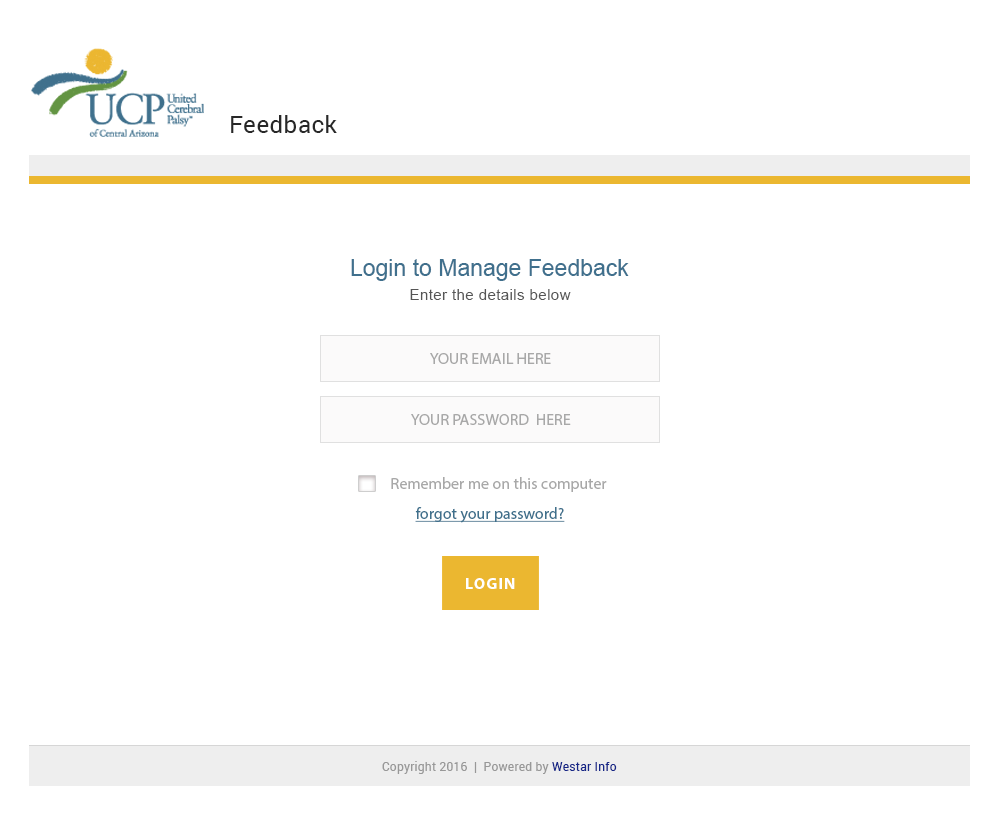
<style>
.page{position:relative;width:1000px;height:834px;background:#ffffff}
.page>*{position:absolute;margin:0}
.t1{font:24px "Roboto-Regular";letter-spacing:0.02em;color:#282828}
.t2{font:23px "ArialMT";color:#40708d}
.t3{font:15.1px "ArialMT";letter-spacing:0.025em;color:#555555}
.t4{font:16px "MyriadPro-Regular";color:#a8a8a8;text-transform:uppercase}
.t5{font:16px "MyriadPro-Regular";color:#a8a8a8}
.t6{font:16px "MyriadPro-Regular";color:#3f708c;text-decoration:underline}
.t7{font:16px "MyriadPro-Bold";letter-spacing:0.075em;color:#ffffff}
.t8{font:12px "Roboto-Regular";letter-spacing:0.02em;color:#989898}
.t9{font:12px "Roboto-Regular";letter-spacing:0.02em;color:#172788}
</style>
<div class="page">
<p class="t1" style="left:231px;top:115px;width:106px;height:18px">Feedback</p>
<p class="t2" style="left:351px;top:259px;width:278px;height:22px">Login to Manage Feedback</p>
<p class="t3" style="left:410px;top:289px;width:161px;height:11px">Enter the details below</p>
<p class="t4" style="left:430px;top:353px;width:121px;height:11px">your email here</p>
<p class="t4" style="left:411px;top:414px;width:160px;height:11px">your password  here</p>
<p class="t5" style="left:391px;top:477px;width:216px;height:15px">Remember me on this computer</p>
<p class="t6" style="left:415px;top:507px;width:150px;height:16px">forgot your password?</p>
<p class="t7" style="left:466px;top:578px;width:49px;height:11px">LOGIN</p>
<p class="t8" style="left:382px;top:761px;width:235px;height:13px">Copyright 2016  |  Powered by <span class="t9">Westar Info</span></p>
</div>
